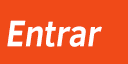
<style>
.page{position:relative;width:128px;height:64px;background:#f04a18}
.page>*{position:absolute;margin:0}
.t1{font:37.8px "FogSansIt";color:#ffffff;scale:0.87 1}
</style>
<div class="page">
<p class="t1" style="left:7px;top:20px;width:95px;height:27px">Entrar</p>
</div>
